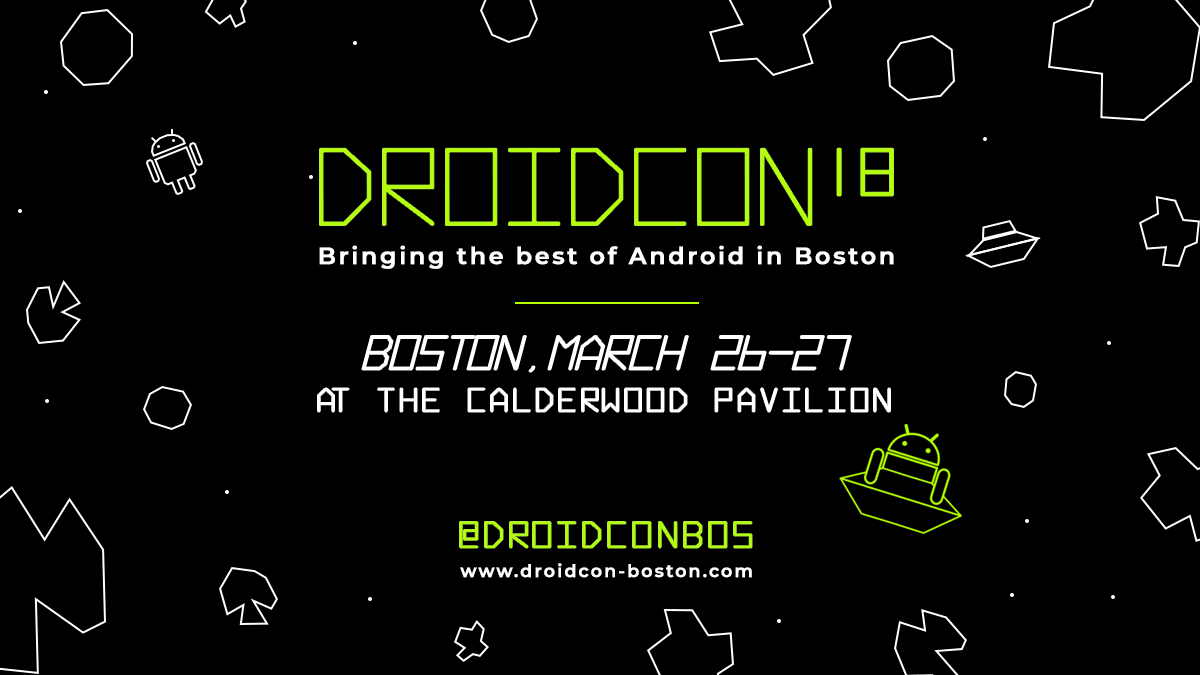
<style>
.page{position:relative;width:1200px;height:675px;background:#000000}
.page>*{position:absolute;margin:0}
.t1{font:23.4px "Montserrat-SemiBold";letter-spacing:0.1em;color:#ffffff;font-weight:bold}
.t2{font:30.7px "Hyperspace";letter-spacing:0.1em;color:#ffffff;font-weight:bold}
.t3{font:34px "Hyperspace";letter-spacing:0.1em;color:#b4ff00;font-weight:bold}
.t4{font:17.4px "Montserrat-SemiBold";letter-spacing:0.1em;color:#ffffff;font-weight:bold}
</style>
<div class="page">
<p class="t1" style="left:319px;top:245px;width:575px;height:24px">Bringing the best of Android in Boston</p>
<p class="t2" style="left:318px;top:388px;width:572px;height:24px">AT THE Calderwood Pavilion</p>
<p class="t3" style="left:460px;top:522px;width:292px;height:26px">@DroidconBos</p>
<p class="t4" style="left:460px;top:563px;width:292px;height:15px">www.droidcon-boston.com</p>
</div>
